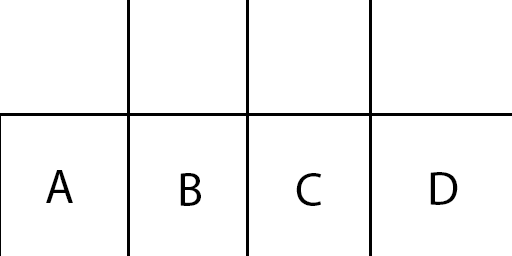
<style>
.page{position:relative;width:512px;height:256px;background:#ffffff}
.page>*{position:absolute;margin:0}
.t1{font:48px "MyriadHebrew-Regular";color:#000000}
</style>
<div class="page">
<p class="t1" style="left:46px;top:170px;width:27px;height:33px">A</p>
<p class="t1" style="left:180px;top:173px;width:21px;height:33px">B</p>
<p class="t1" style="left:296px;top:173px;width:26px;height:33px">C</p>
<p class="t1" style="left:430px;top:172px;width:28px;height:33px">D</p>
</div>
